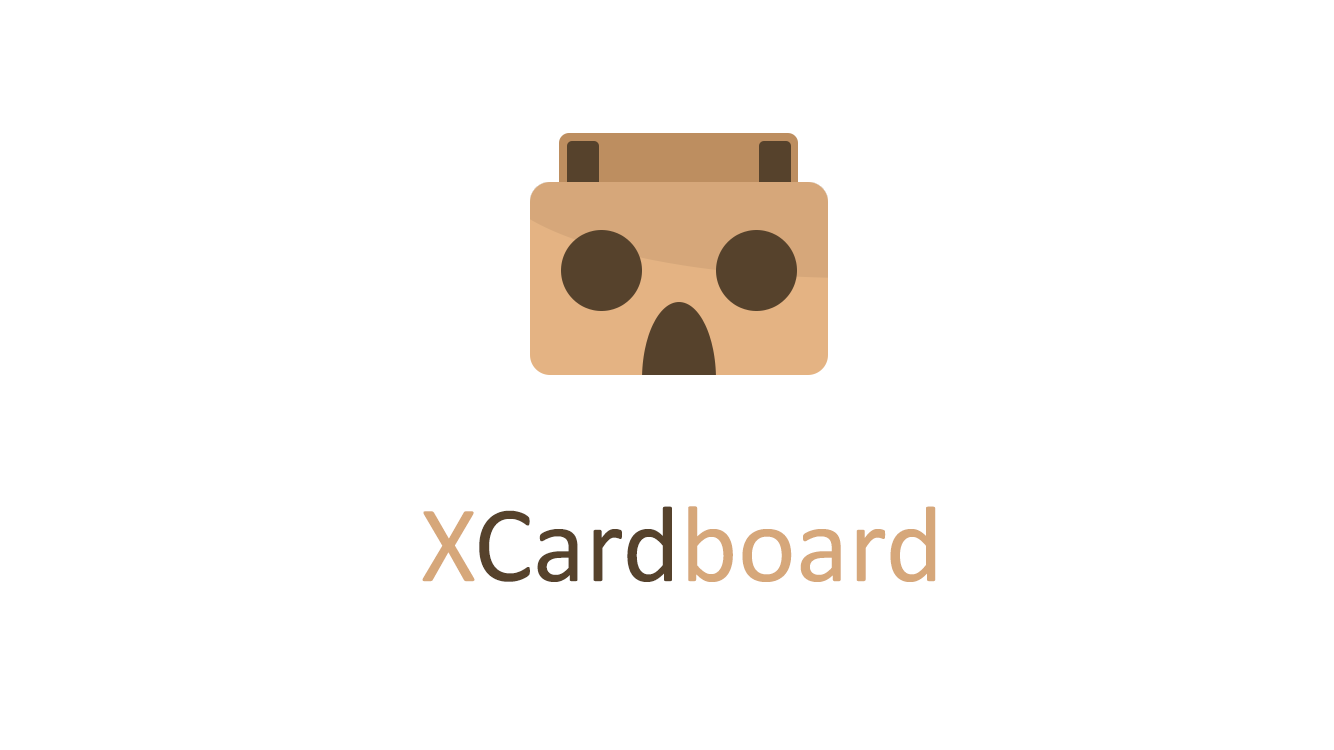
<style>
.page{position:relative;width:1334px;height:750px;background:#ffffff}
.page>*{position:absolute;margin:0}
.t1{font:110px "Calibri";color:#d6a77a}
.t2{font:110px "Calibri";color:#56422c}
</style>
<div class="page">
<p class="t1" style="left:422px;top:506px;width:514px;height:76px">X<span class="t2">Card</span>board</p>
</div>
